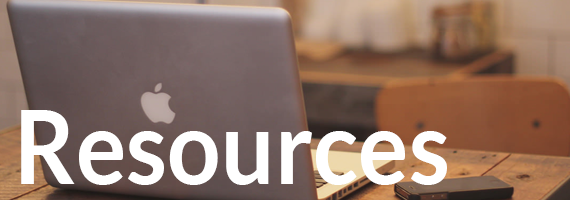
<style>
.page{position:relative;width:570px;height:200px}
.page>*{position:absolute;margin:0}
.t1{font:101.6px "Lato-Bold";color:#ffffff;scale:0.93 1}
</style>
<div class="page">
<p class="t1" style="left:21px;top:110px;width:426px;height:75px">Resources</p>
</div>
